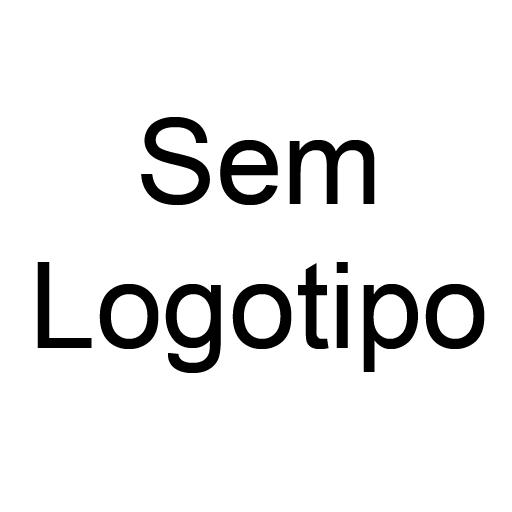
<style>
.page{position:relative;width:512px;height:512px;background:#ffffff}
.page>*{position:absolute;margin:0}
.t1{font:120px "ArialMT";color:#000000}
</style>
<div class="page">
<p class="t1" style="left:37px;top:117px;width:448px;height:256px;text-align:center">Sem<br>Logotipo</p>
</div>
